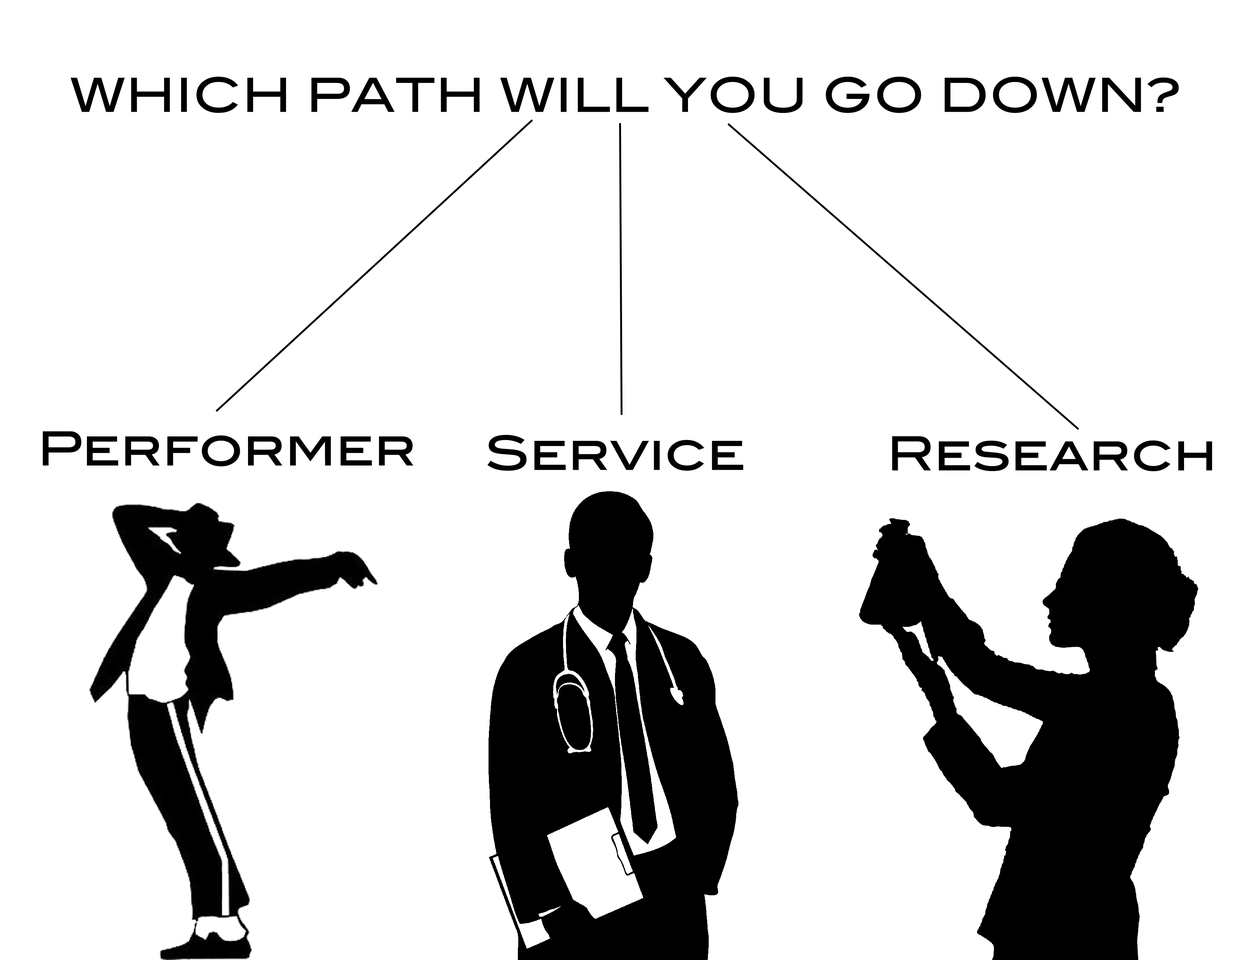
<style>
.page{position:relative;width:1242px;height:960px;background:#ffffff}
.page>*{position:absolute;margin:0}
.t1{font:47.1px "BlairMdITCTTMedium";color:#000000}
</style>
<div class="page">
<p class="t1" style="left:70px;top:76px;width:1109px;height:37px">WHICH PATH WILL YOU GO DOWN?</p>
<p class="t1" style="left:43px;top:431px;width:370px;height:35px">Performer</p>
<p class="t1" style="left:487px;top:435px;width:256px;height:36px">Service</p>
<p class="t1" style="left:892px;top:436px;width:320px;height:35px">Research</p>
</div>
